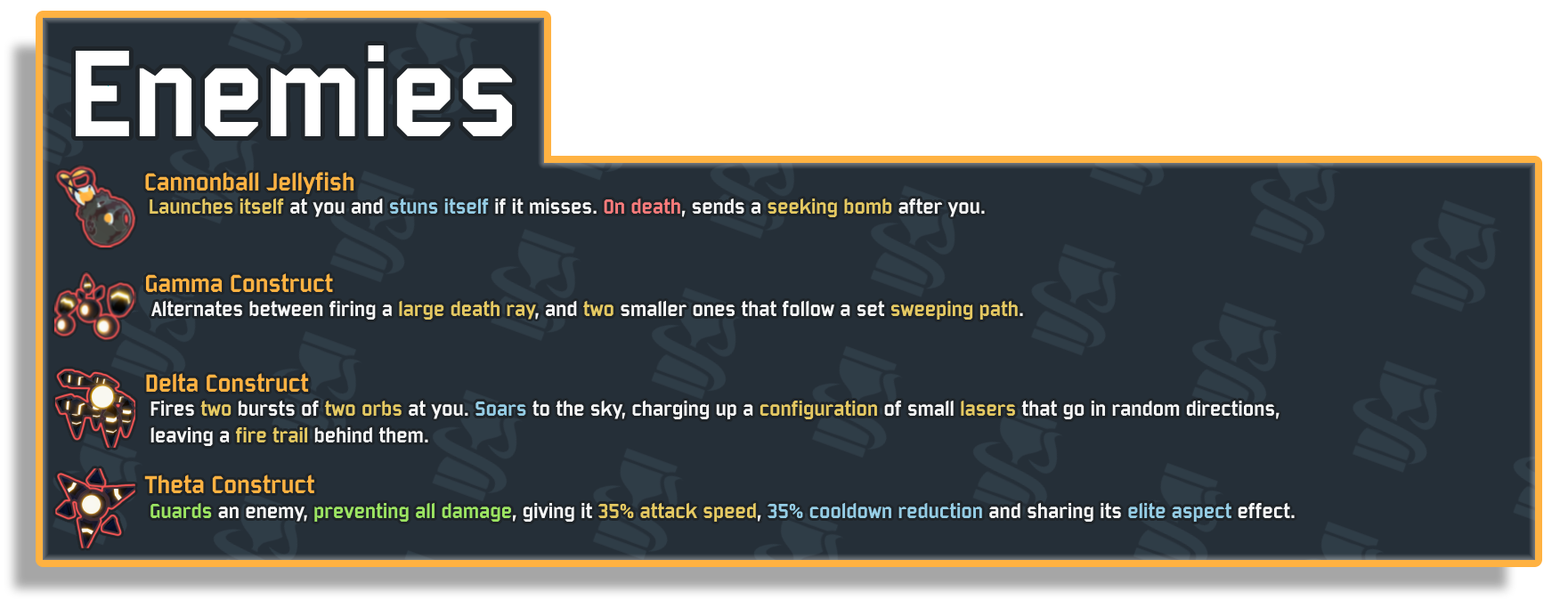
<style>
.page{position:relative;width:1568px;height:600px;background:#252f38}
.page>*{position:absolute;margin:0}
.t1{font:133.6px "Bombardier";color:#ffffff}
.t2{font:26.7px "Bombardier";color:#ffb242}
.t3{font:22.3px "Bombardier";color:#e5c962}
.t4{font:22.3px "Bombardier";color:#f7f7f7}
.t5{font:22.3px "Bombardier";color:#95cde5}
.t6{font:22.3px "Bombardier";color:#fe7c7c}
.t7{font:22.3px "Bombardier";color:#9ce562}
</style>
<div class="page">
<p class="t1" style="left:76px;top:45px;width:437px;height:91px">Enemies</p>
<p class="t2" style="left:145px;top:172px;width:209px;height:23px">Cannonball Jellyfish</p>
<p class="t3" style="left:150px;top:199px;width:835px;height:18px">Launches itself<span class="t4"> at you and </span><span class="t5">stuns itself</span><span class="t4"> if it misses. </span><span class="t6">On death</span><span class="t4">, sends a </span>seeking bomb<span class="t4"> after you.</span></p>
<p class="t2" style="left:146px;top:273px;width:187px;height:20px">Gamma Construct</p>
<p class="t4" style="left:151px;top:301px;width:872px;height:20px">Alternates between firing a <span class="t3">large death ray</span>, and <span class="t3">two</span> smaller ones that follow a set <span class="t3">sweeping path</span>.</p>
<p class="t2" style="left:146px;top:373px;width:163px;height:19px">Delta Construct</p>
<p class="t4" style="left:150px;top:400px;width:1130px;height:46px">Fires <span class="t3">two </span>bursts of <span class="t3">two orbs </span>at you. <span class="t5">Soars</span> to the sky, charging up a <span class="t3">configuration</span> of small <span class="t3">lasers</span> that go in random directions, <br>leaving a <span class="t3">fire trail</span> behind them.</p>
<p class="t2" style="left:144px;top:475px;width:170px;height:18px">Theta Construct</p>
<p class="t5" style="left:150px;top:503px;width:1145px;height:20px"><span class="t7">Guards</span><span class="t4"> an enemy, </span><span class="t7">preventing all damage</span><span class="t4">, giving it </span><span class="t3">35% attack speed</span><span class="t4">, </span>35% cooldown reduction<span class="t4"> and sharing its </span>elite aspect<span class="t4"> effect.</span></p>
</div>
